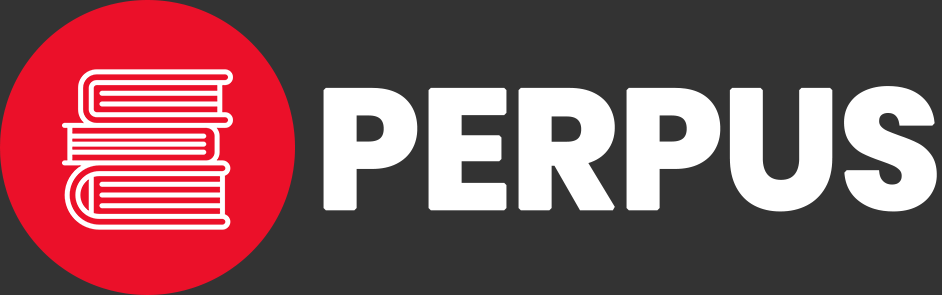
<style>
.page{position:relative;width:942px;height:295px;background:#333333}
.page>*{position:absolute;margin:0}
.t1{font:166.7px "Poppins-Bold";letter-spacing:-0.02em;color:#ffffff;font-weight:bold}
</style>
<div class="page">
<p class="t1" style="left:323px;top:86px;width:614px;height:126px">PERPUS</p>
</div>
